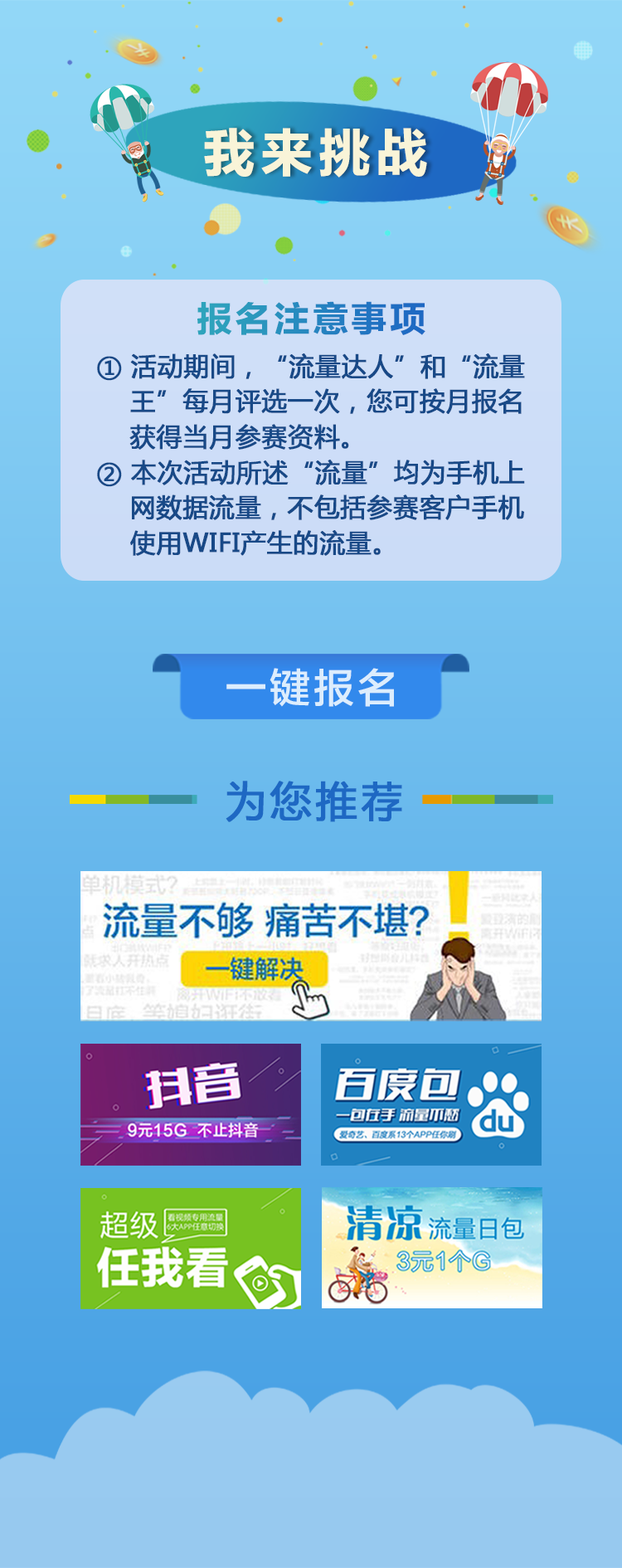
<style>
.page{position:relative;width:622px;height:1568px}
.page>*{position:absolute;margin:0}
.t1{font:51.9px "FZLTDHK--GBK1-0";letter-spacing:0.1em;color:#f9f4d8;text-transform:uppercase}
.t2{font:35.4px "FZLTDHK--GBK1-0";letter-spacing:0.075em}
.t3{font:25.4px/35.4px "MicrosoftYaHei";letter-spacing:0.01em;color:#184987;font-weight:bold}
.t4{font:40.8px "FZLTZHK--GBK1-0";letter-spacing:0.075em;color:#dcedfd}
.t5{font:41.3px "MicrosoftYaHei";letter-spacing:0.075em;color:#1e68c3;font-weight:bold}
</style>
<div class="page">
<p class="t1" style="left:204px;top:128px;width:223px;height:50px">我来挑战</p>
<p class="t2" style="left:197px;top:301px;width:229px;height:34px">报名注意事项</p>
<p class="t3" style="left:97px;top:353px;width:428px;height:203px">① 活动期间，“流量达人”和“流量<br>    王”每月评选一次，您可按月报名<br>    获得当月参赛资料。<br>② 本次活动所述“流量”均为手机上<br>    网数据流量，不包括参赛客户手机<br>    使用WIFI产生的流量。</p>
<p class="t4" style="left:226px;top:668px;width:168px;height:39px">一键报名</p>
<p class="t5" style="left:226px;top:781px;width:176px;height:41px">为您推荐</p>
</div>
